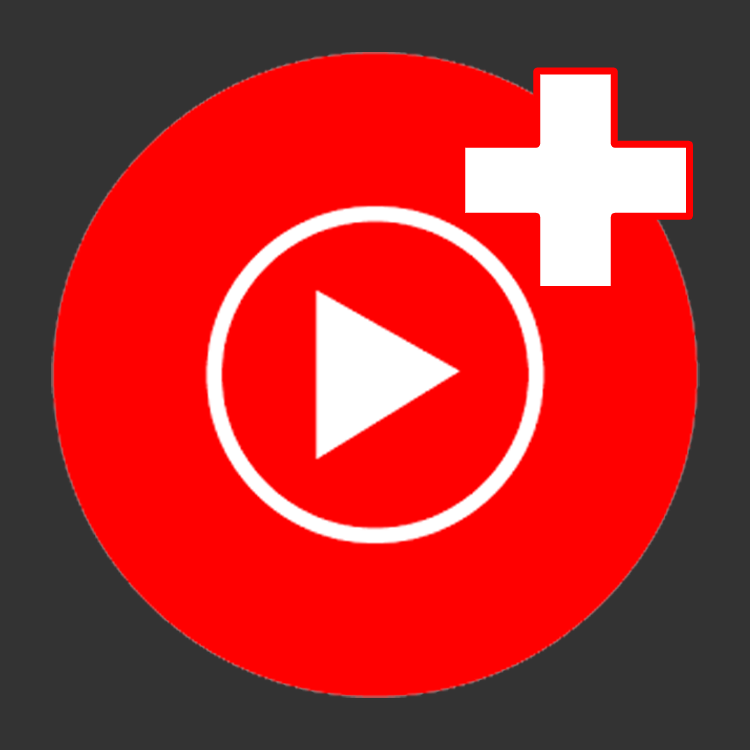
<style>
.page{position:relative;width:750px;height:750px;background:#ff0000}
.page>*{position:absolute;margin:0}
.t1{font:426.2px "Gotham-Black";letter-spacing:-0.04em;color:#ffffff;scale:1.04 1}
</style>
<div class="page">
<p class="t1" style="left:461px;top:71px;width:229px;height:219px">+</p>
</div>
